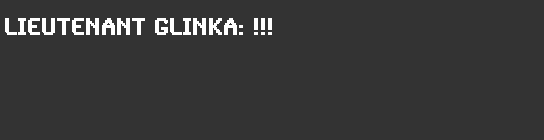
<style>
.page{position:relative;width:544px;height:140px;background:#333333}
.page>*{position:absolute;margin:0}
.t1{font:24px "SynchroLET";color:#ffffff;font-weight:bold}
</style>
<div class="page">
<p class="t1" style="left:5px;top:18px;width:267px;height:17px">LIEUTENANT GLINKA: !!!</p>
</div>
